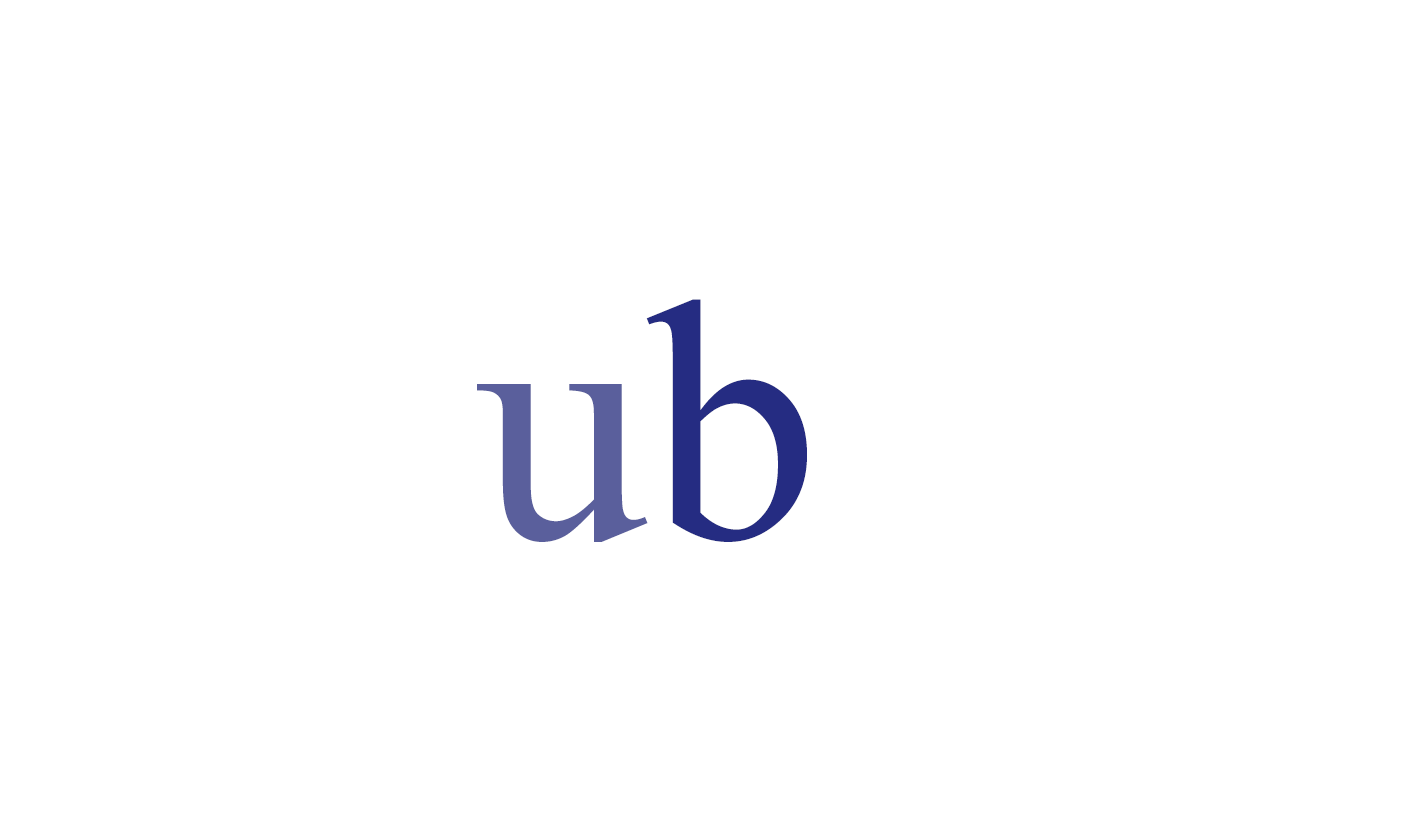
<style>
.page{position:relative;width:1416px;height:820px;background:#ffffff}
.page>*{position:absolute;margin:0}
.t1{font:342.1px "TimesNewRomanPSMT";color:#5a5f9c}
.t2{font:342.1px "TimesNewRomanPSMT";color:#252c82}
</style>
<div class="page">
<p class="t1" style="left:477px;top:299px;width:330px;height:243px">u<span class="t2">b</span></p>
</div>
